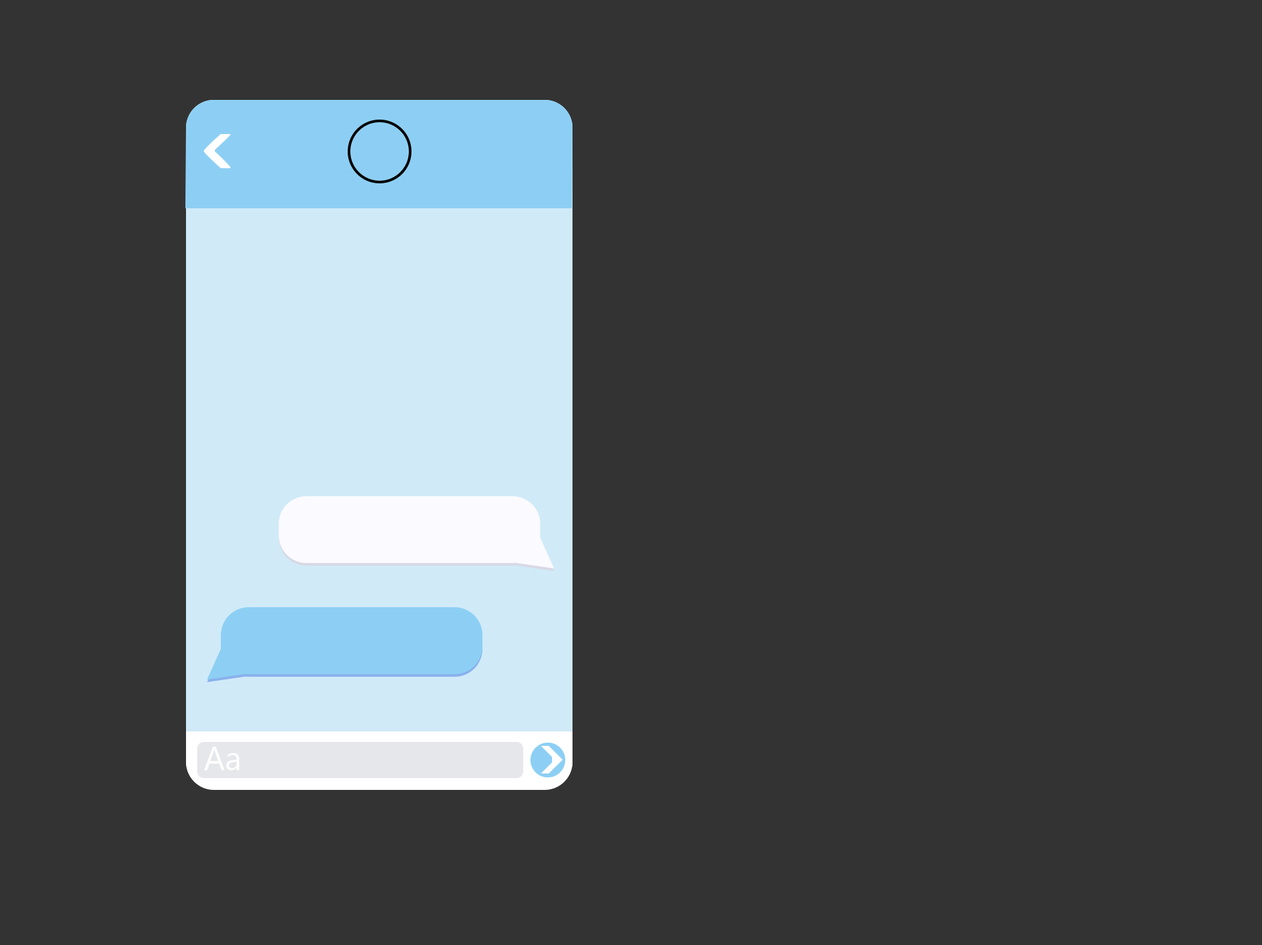
<style>
.page{position:relative;width:1262px;height:945px;background:#333333}
.page>*{position:absolute;margin:0}
.t1{font:32.9px "MyanmarText";color:#ffffff}
</style>
<div class="page">
<p class="t1" style="left:204px;top:747px;width:35px;height:23px">Aa</p>
</div>
